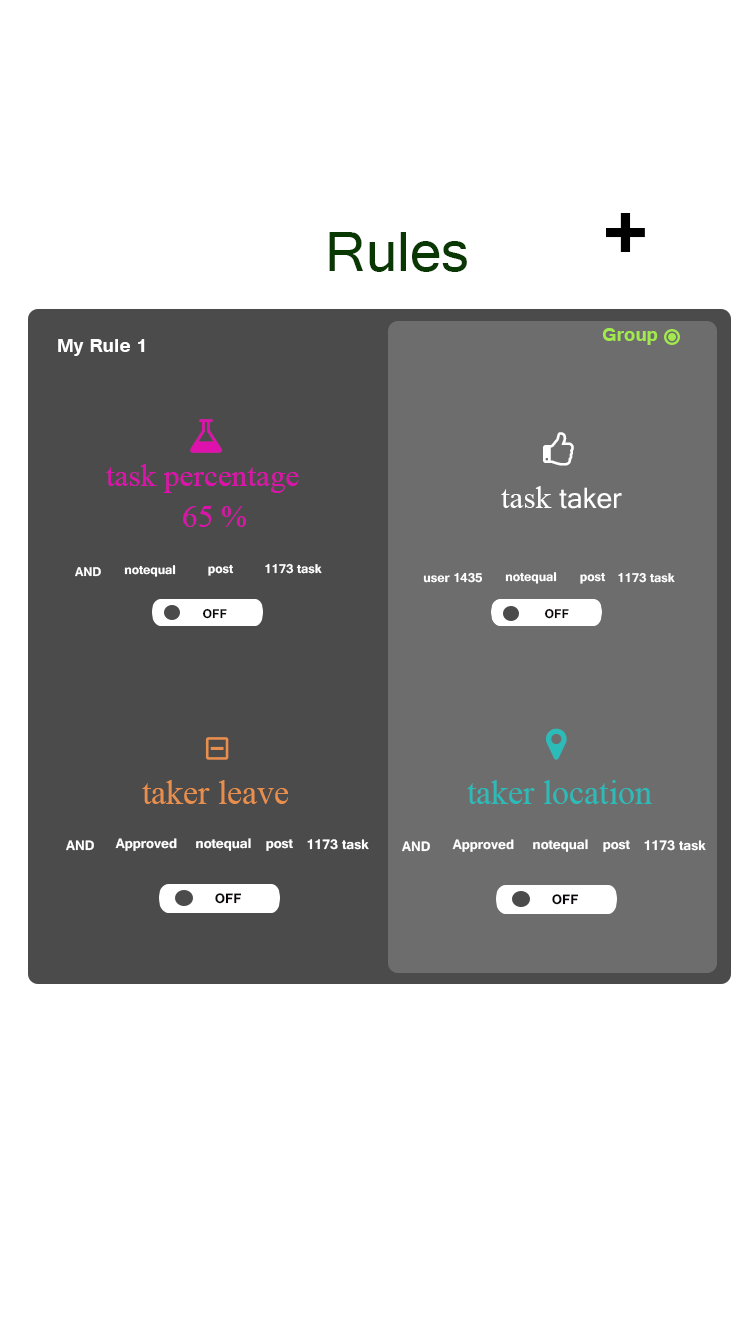
<style>
.page{position:relative;width:750px;height:1334px;background:#ffffff}
.page>*{position:absolute;margin:0}
.t1{font:103.1px "Tunga-Bold";color:#000000}
.t2{font:72px "Tunga";color:#093803}
.t3{font:24px "Tunga-Bold";color:#a2e94d}
.t4{font:24px "Tunga-Bold";color:#ffffff}
.t5{font:31.3px "TimesNewRomanPSMT";color:#df11ac}
.t6{font:31.3px "Latha";color:#fefefe}
.t7{font:31.3px "TimesNewRomanPSMT";color:#fefefe}
.t8{font:15.6px "Tunga-Bold";color:#ffffff}
.t9{font:15.6px "Tunga-Bold";color:#0b060a}
.t10{font:34px "TimesNewRomanPSMT";color:#e98f4d}
.t11{font:34px "TimesNewRomanPSMT";color:#2bbcba}
.t12{font:17px "Tunga-Bold";color:#ffffff}
.t13{font:17px "Tunga-Bold";color:#0b060a}
</style>
<div class="page">
<p class="t1" style="left:606px;top:213px;width:39px;height:39px">+</p>
<p class="t2" style="left:329px;top:232px;width:138px;height:40px">Rules</p>
<p class="t3" style="left:602px;top:328px;width:56px;height:17px">Group</p>
<p class="t4" style="left:58px;top:339px;width:87px;height:17px">My Rule 1</p>
<p class="t5" style="left:106px;top:464px;width:193px;height:29px">task percentage</p>
<p class="t5" style="left:106px;top:464px;width:193px;height:29px">task percentage</p>
<p class="t6" style="left:501px;top:486px;width:121px;height:23px"><span class="t7">task </span>taker</p>
<p class="t5" style="left:183px;top:506px;width:63px;height:21px">65 %</p>
<p class="t5" style="left:183px;top:506px;width:63px;height:21px">65 %</p>
<p class="t8" style="left:75px;top:567px;width:26px;height:10px">AND</p>
<p class="t8" style="left:124px;top:565px;width:52px;height:12px">notequal</p>
<p class="t8" style="left:124px;top:565px;width:52px;height:12px">notequal</p>
<p class="t8" style="left:208px;top:564px;width:26px;height:12px">post</p>
<p class="t8" style="left:208px;top:564px;width:26px;height:12px">post</p>
<p class="t8" style="left:265px;top:563px;width:57px;height:11px">1173 task</p>
<p class="t8" style="left:265px;top:563px;width:57px;height:11px">1173 task</p>
<p class="t8" style="left:423px;top:572px;width:59px;height:11px">user 1435</p>
<p class="t8" style="left:505px;top:572px;width:52px;height:12px">notequal</p>
<p class="t8" style="left:580px;top:572px;width:26px;height:12px">post</p>
<p class="t8" style="left:618px;top:572px;width:57px;height:11px">1173 task</p>
<p class="t9" style="left:202px;top:608px;width:25px;height:11px">OFF</p>
<p class="t9" style="left:544px;top:608px;width:25px;height:11px">OFF</p>
<p class="t10" style="left:142px;top:780px;width:147px;height:24px">taker leave</p>
<p class="t11" style="left:467px;top:780px;width:185px;height:24px">taker location</p>
<p class="t12" style="left:66px;top:840px;width:28px;height:11px">AND</p>
<p class="t12" style="left:115px;top:838px;width:62px;height:13px">Approved</p>
<p class="t12" style="left:196px;top:838px;width:55px;height:13px">notequal</p>
<p class="t12" style="left:266px;top:839px;width:27px;height:12px">post</p>
<p class="t12" style="left:307px;top:839px;width:62px;height:11px">1173 task</p>
<p class="t12" style="left:402px;top:841px;width:28px;height:11px">AND</p>
<p class="t12" style="left:452px;top:839px;width:62px;height:13px">Approved</p>
<p class="t12" style="left:533px;top:839px;width:55px;height:13px">notequal</p>
<p class="t12" style="left:603px;top:840px;width:27px;height:12px">post</p>
<p class="t12" style="left:644px;top:840px;width:62px;height:11px">1173 task</p>
<p class="t13" style="left:215px;top:893px;width:27px;height:11px">OFF</p>
<p class="t13" style="left:552px;top:894px;width:27px;height:11px">OFF</p>
</div>
